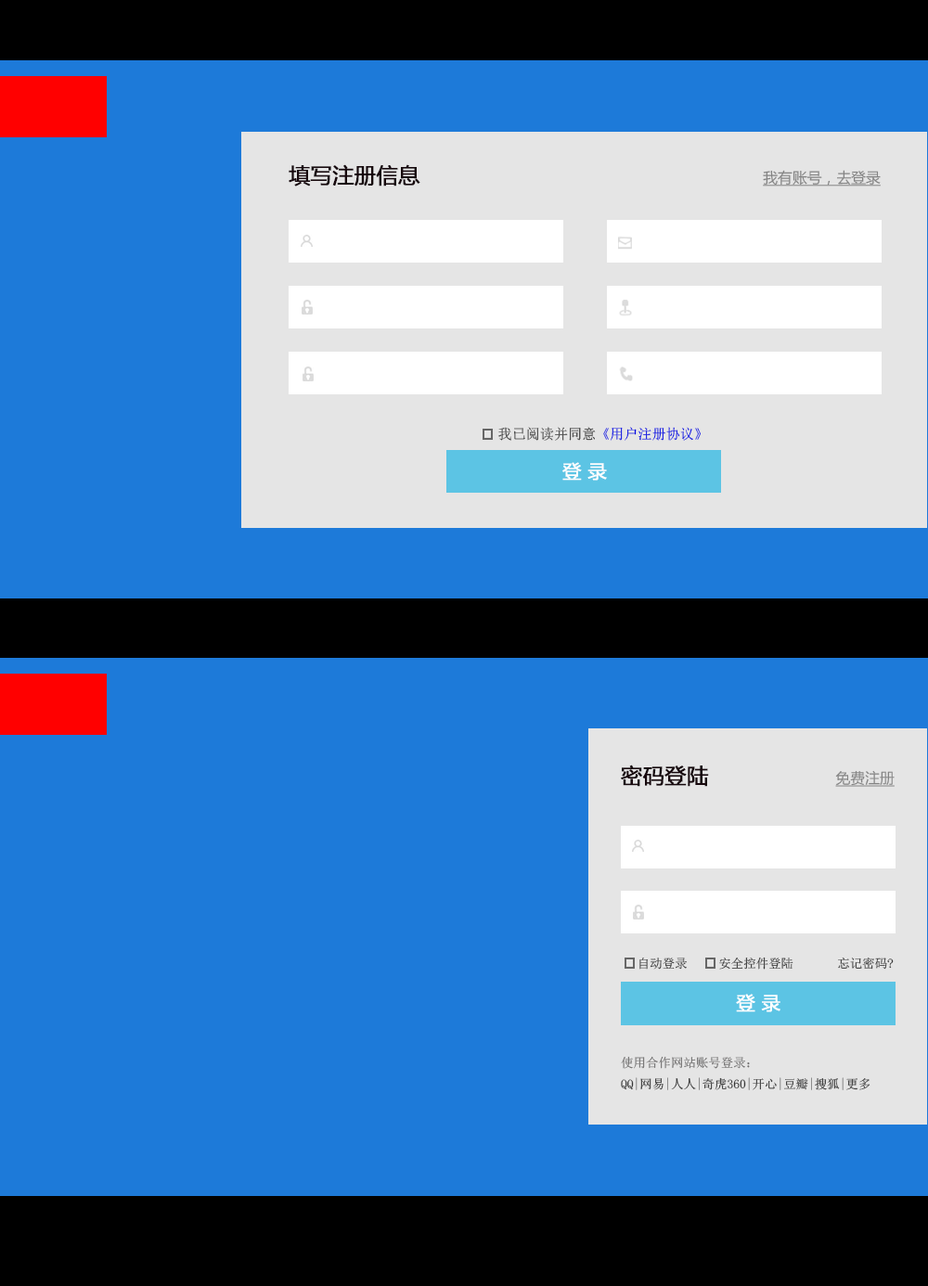
<style>
.page{position:relative;width:928px;height:1286px;background:#1d7ad9}
.page>*{position:absolute;margin:0}
.t1{font:21.3px "MicrosoftYaHei";color:#17080d;font-weight:bold}
.t2{font:14.7px "MicrosoftYaHei";color:#838383;text-decoration:underline}
.t3{font:14.1px "SimSun"}
.t4{font:18.8px "MicrosoftYaHei";color:#ffffff;font-weight:bold}
.t5{font:12.5px "SimSun";color:#343434}
.t6{font:12.5px "SimSun";color:#706f6f}
</style>
<div class="page">
<p class="t1" style="left:288px;top:164px;width:132px;height:22px">填写注册信息</p>
<p class="t2" style="left:762px;top:170px;width:118px;height:16px">我有账号，去登录</p>
<p class="t3" style="left:498px;top:427px;width:202px;height:14px">我已阅读并同意《用户注册协议》</p>
<p class="t4" style="left:562px;top:462px;width:45px;height:18px">登 录</p>
<p class="t1" style="left:621px;top:764px;width:88px;height:23px">密码登陆</p>
<p class="t2" style="left:835px;top:770px;width:59px;height:17px">免费注册</p>
<p class="t5" style="left:639px;top:956px;width:254px;height:13px">自动登录     安全控件登陆       忘记密码?</p>
<p class="t4" style="left:736px;top:993px;width:44px;height:19px">登 录</p>
<p class="t5" style="left:621px;top:1056px;width:249px;height:34px"><span class="t6">使用合作网站账号登录：<br></span>QQ|网易|人人|奇虎360|开心|豆瓣|搜狐|更多</p>
</div>
